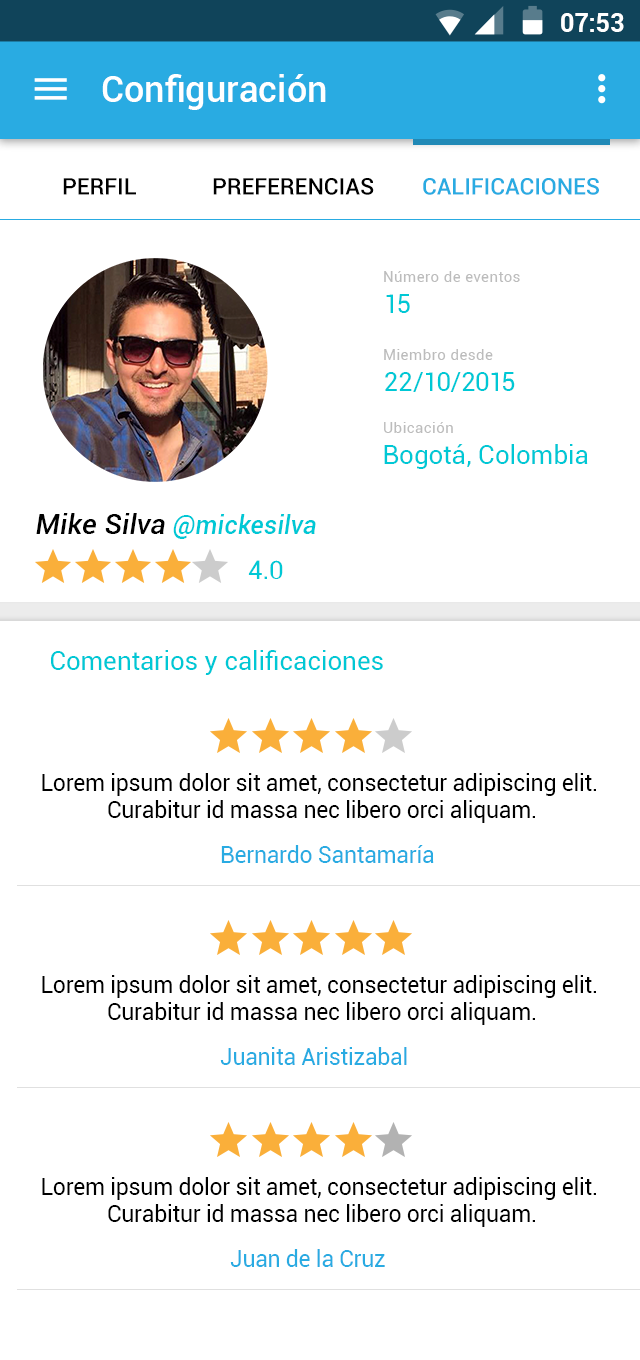
<style>
.page{position:relative;width:640px;height:1360px;background:#ffffff}
.page>*{position:absolute;margin:0}
.t1{font:24.9px "Roboto-Bold";color:#ffffff}
.t2{font:35.8px "Roboto-Medium";letter-spacing:0.005em;color:#ffffff}
.t3{font:22.9px "Roboto-Medium";color:#000000}
.t4{font:22.9px "Roboto-Medium";color:#29abe2}
.t5{font:15.3px "Roboto-Regular";letter-spacing:0.02em;color:#bcbcbc}
.t6{font:25.5px "Roboto-Regular";letter-spacing:0.01em;color:#00c8d5}
.t7{font:24.9px "Roboto-MediumItalic";letter-spacing:0.01em;color:#00c8d5}
.t8{font:27.9px "Roboto-MediumItalic";letter-spacing:0.01em;color:#000000}
.t9{font:22.9px/27.1px "Roboto-Regular";letter-spacing:-0.01em;color:#000000}
.t10{font:22.9px "Roboto-Regular";letter-spacing:-0.01em;color:#29abe2}
</style>
<div class="page">
<p class="t1" style="left:561px;top:13px;width:63px;height:19px">07:53</p>
<p class="t2" style="left:102px;top:74px;width:224px;height:36px">Configuración</p>
<p class="t3" style="left:63px;top:178px;width:73px;height:17px">PERFIL</p>
<p class="t3" style="left:213px;top:178px;width:161px;height:17px">PREFERENCIAS</p>
<p class="t4" style="left:423px;top:178px;width:176px;height:17px">CALIFICACIONES</p>
<p class="t5" style="left:384px;top:271px;width:136px;height:11px">Número de eventos</p>
<p class="t6" style="left:386px;top:294px;width:24px;height:19px">15</p>
<p class="t5" style="left:384px;top:349px;width:109px;height:11px">Miembro desde</p>
<p class="t6" style="left:385px;top:372px;width:130px;height:20px">22/10/2015</p>
<p class="t5" style="left:384px;top:422px;width:69px;height:11px">Ubicación</p>
<p class="t6" style="left:384px;top:444px;width:204px;height:25px">Bogotá, Colombia</p>
<p class="t7" style="left:36px;top:513px;width:280px;height:26px"><span class="t8">Mike Silva </span>@mickesilva</p>
<p class="t6" style="left:248px;top:560px;width:35px;height:19px">4.0</p>
<p class="t6" style="left:51px;top:650px;width:332px;height:25px">Comentarios y calificaciones</p>
<p class="t9" style="left:42px;top:773px;width:554px;height:50px;text-align:center">Lorem ipsum dolor sit amet, consectetur adipiscing elit. <br>Curabitur id massa nec libero orci aliquam.</p>
<p class="t10" style="left:221px;top:845px;width:213px;height:18px">Bernardo Santamaría</p>
<p class="t9" style="left:42px;top:975px;width:554px;height:50px;text-align:center">Lorem ipsum dolor sit amet, consectetur adipiscing elit. <br>Curabitur id massa nec libero orci aliquam.</p>
<p class="t10" style="left:220px;top:1047px;width:187px;height:18px">Juanita Aristizabal</p>
<p class="t9" style="left:42px;top:1177px;width:554px;height:50px;text-align:center">Lorem ipsum dolor sit amet, consectetur adipiscing elit. <br>Curabitur id massa nec libero orci aliquam.</p>
<p class="t10" style="left:230px;top:1249px;width:155px;height:18px">Juan de la Cruz</p>
</div>
